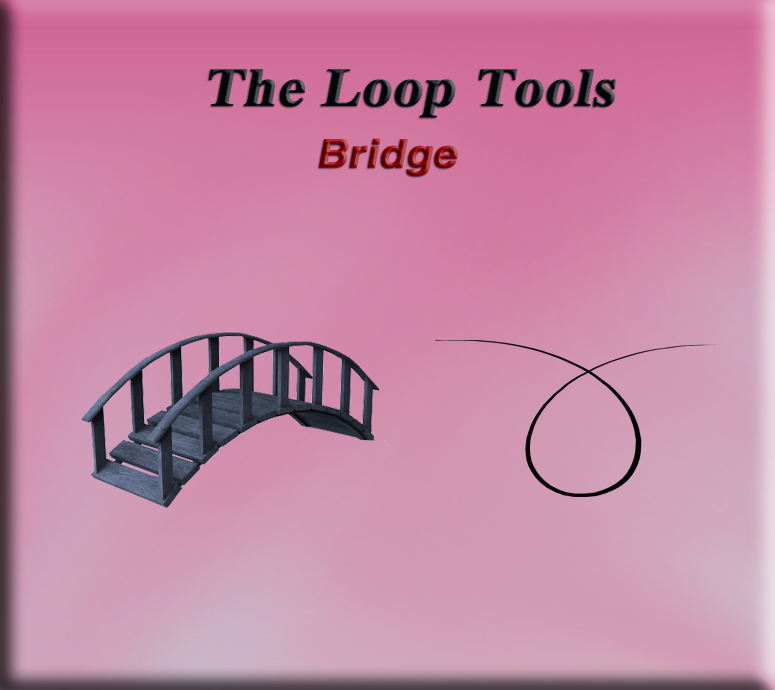
<style>
.page{position:relative;width:775px;height:690px}
.page>*{position:absolute;margin:0}
.t1{font:53.9px "TimesNewRomanPS-BoldMT";color:#000609;font-weight:bold;font-style:italic;scale:1.08 1}
.t2{font:39.1px "HelveticaLTStd-Bold";font-weight:bold;font-style:italic;scale:1.08 1}
.t3{font:53.9px "TimesNewRomanPS-BoldMT";font-weight:bold;font-style:italic;scale:1.08 1}
</style>
<div class="page">
<p class="t1" style="left:209px;top:69px;width:407px;height:49px">The Loop Tools</p>
<p class="t2" style="left:319px;top:138px;width:139px;height:38px"><span class="t3"> </span>Bridge</p>
</div>
